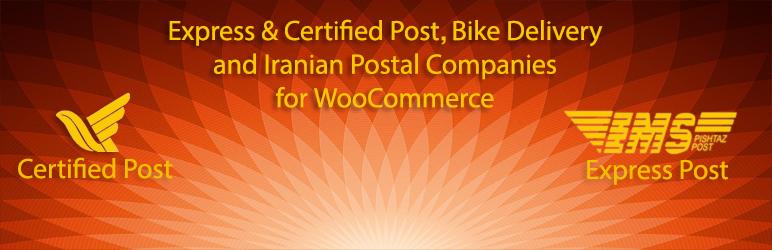
<style>
.page{position:relative;width:772px;height:250px}
.page>*{position:absolute;margin:0}
.t1{font:28px "MyriadPro-Regular";color:#fbc700}
.t2{font:28px "BTrafficBold";color:#fbc700}
.t3{font:28px "MyriadPro-Regular";color:#f4be00}
</style>
<div class="page">
<p class="t1" style="left:169px;top:19px;width:434px;height:89px;text-align:center">Express &amp; Certified Post<span class="t2">, </span>Bike Delivery<br>and Iranian Postal Companies<br>for WooCommerce</p>
<p class="t3" style="left:18px;top:157px;width:155px;height:22px">Certified Post</p>
<p class="t3" style="left:587px;top:159px;width:141px;height:26px">Express Post</p>
</div>
